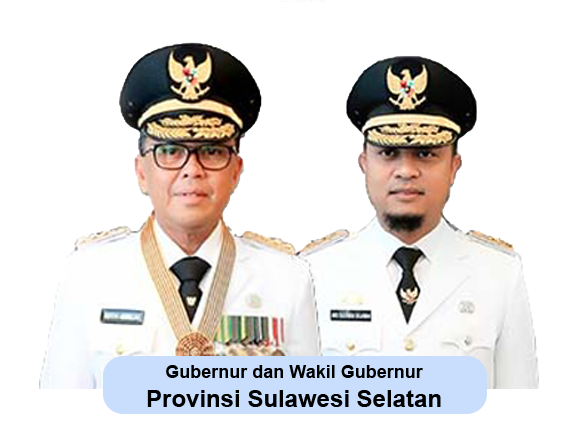
<style>
.page{position:relative;width:578px;height:430px;background:#ffffff}
.page>*{position:absolute;margin:0}
.t1{font:18px "Arial-BoldMT";color:#000000}
.t2{font:24px "Arial-BoldMT";color:#000000}
</style>
<div class="page">
<p class="t1" style="left:147px;top:365px;width:294px;height:42px;text-align:center">Gubernur dan Wakil Gubernur<br><span class="t2">Provinsi Sulawesi Selatan</span></p>
</div>
